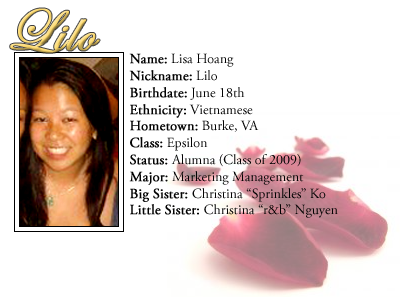
<style>
.page{position:relative;width:400px;height:300px;background:#ffffff}
.page>*{position:absolute;margin:0}
.t1{font:60px "EdwardianScriptITC";font-weight:bold}
.t2{font:14px "AGaramondPro-Regular";color:#000000}
.t3{font:14px "AGaramondPro-Regular";color:#000000;font-weight:bold}
</style>
<div class="page">
<p class="t1" style="left:10px;top:8px;width:90px;height:45px">Lilo</p>
<p class="t2" style="left:129px;top:53px;width:209px;height:165px"><span class="t3">Name:</span> Lisa Hoang<br><span class="t3">Nickname:</span> Lilo<br><span class="t3">Birthdate:</span> June 18th<br><span class="t3">Ethnicity:</span> Vietnamese<br><span class="t3">Hometown:</span> Burke, VA<br><span class="t3">Class:</span> Epsilon<br><span class="t3">Status: </span>Alumna (Class of 2009)<br><span class="t3">Major:</span> Marketing Management<br><span class="t3">Big Sister: </span>Christina “Sprinkles” Ko<br><span class="t3">Little Sister: </span>Christina “r&amp;b” Nguyen</p>
</div>
